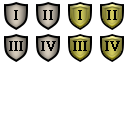
<style>
.page{position:relative;width:128px;height:128px;background:#ffffff}
.page>*{position:absolute;margin:0}
.t1{font:14px "TimesNewRomanPSMT";color:#000000;font-weight:bold}
.t2{font:14px "TimesNewRomanPSMT";letter-spacing:-0.06em;color:#000000;font-weight:bold}
</style>
<div class="page">
<p class="t1" style="left:14px;top:10px;width:4px;height:10px">I</p>
<p class="t1" style="left:43px;top:10px;width:10px;height:10px">II</p>
<p class="t1" style="left:78px;top:10px;width:4px;height:10px">I</p>
<p class="t1" style="left:107px;top:10px;width:10px;height:10px">II</p>
<p class="t2" style="left:9px;top:41px;width:14px;height:10px">III</p>
<p class="t1" style="left:41px;top:41px;width:15px;height:10px">IV</p>
<p class="t2" style="left:73px;top:41px;width:14px;height:10px">III</p>
<p class="t1" style="left:105px;top:41px;width:15px;height:10px">IV</p>
</div>
